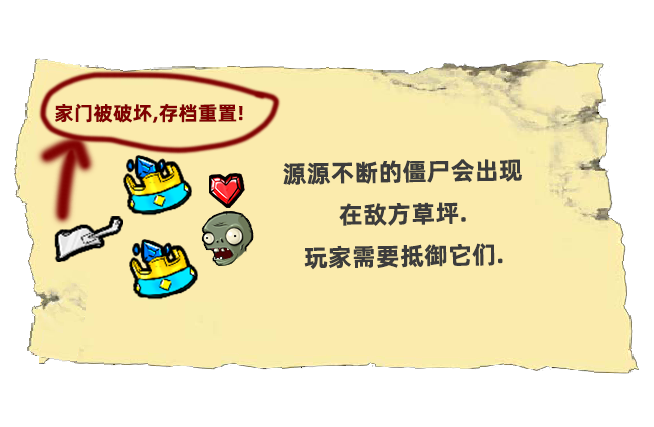
<style>
.page{position:relative;width:654px;height:427px;background:#fbebad}
.page>*{position:absolute;margin:0}
.t1{font:19.9px "AlibabaPuHuiTiB";color:#800101}
.t2{font:24.4px/42.1px "AlibabaPuHuiTiB";color:#3c3c3c}
</style>
<div class="page">
<p class="t1" style="left:55px;top:103px;width:188px;height:20px">家门被破坏,存档重置!</p>
<p class="t2" style="left:283px;top:159px;width:239px;height:111px;text-align:center;rotate:-1deg">源源不断的僵尸会出现<br>在敌方草坪.<br>玩家需要抵御它们.</p>
</div>
